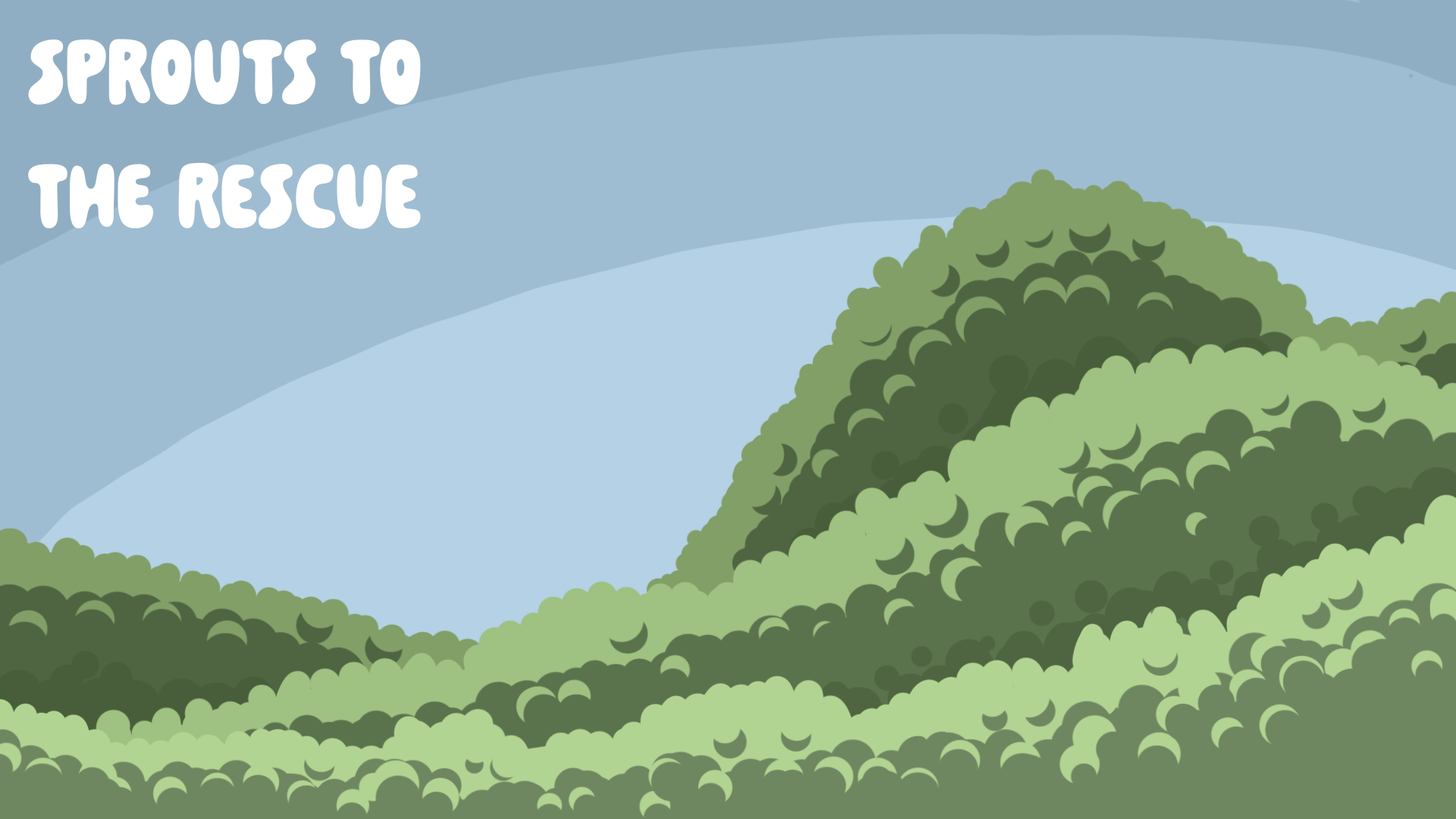
<style>
.page{position:relative;width:1456px;height:819px;background:#9fbdd2}
.page>*{position:absolute;margin:0}
.t1{font:103.6px "PaindeMie-Regular";color:#ffffff}
</style>
<div class="page">
<p class="t1" style="left:28px;top:39px;width:393px;height:190px">Sprouts To The Rescue</p>
</div>
